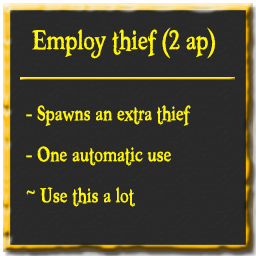
<style>
.page{position:relative;width:256px;height:256px;background:#292929}
.page>*{position:absolute;margin:0}
.t1{font:40px "Booter-ZeroZero";color:#fff600}
.t2{font:30px "Booter-ZeroZero";color:#fff600}
</style>
<div class="page">
<p class="t1" style="left:32px;top:27px;width:183px;height:32px">Employ thief (2 ap)</p>
<p class="t2" style="left:26px;top:105px;width:165px;height:21px">- Spawns an extra thief</p>
<p class="t2" style="left:26px;top:146px;width:145px;height:20px">- One automatic use</p>
<p class="t2" style="left:26px;top:187px;width:109px;height:20px">~ Use this a lot</p>
</div>
